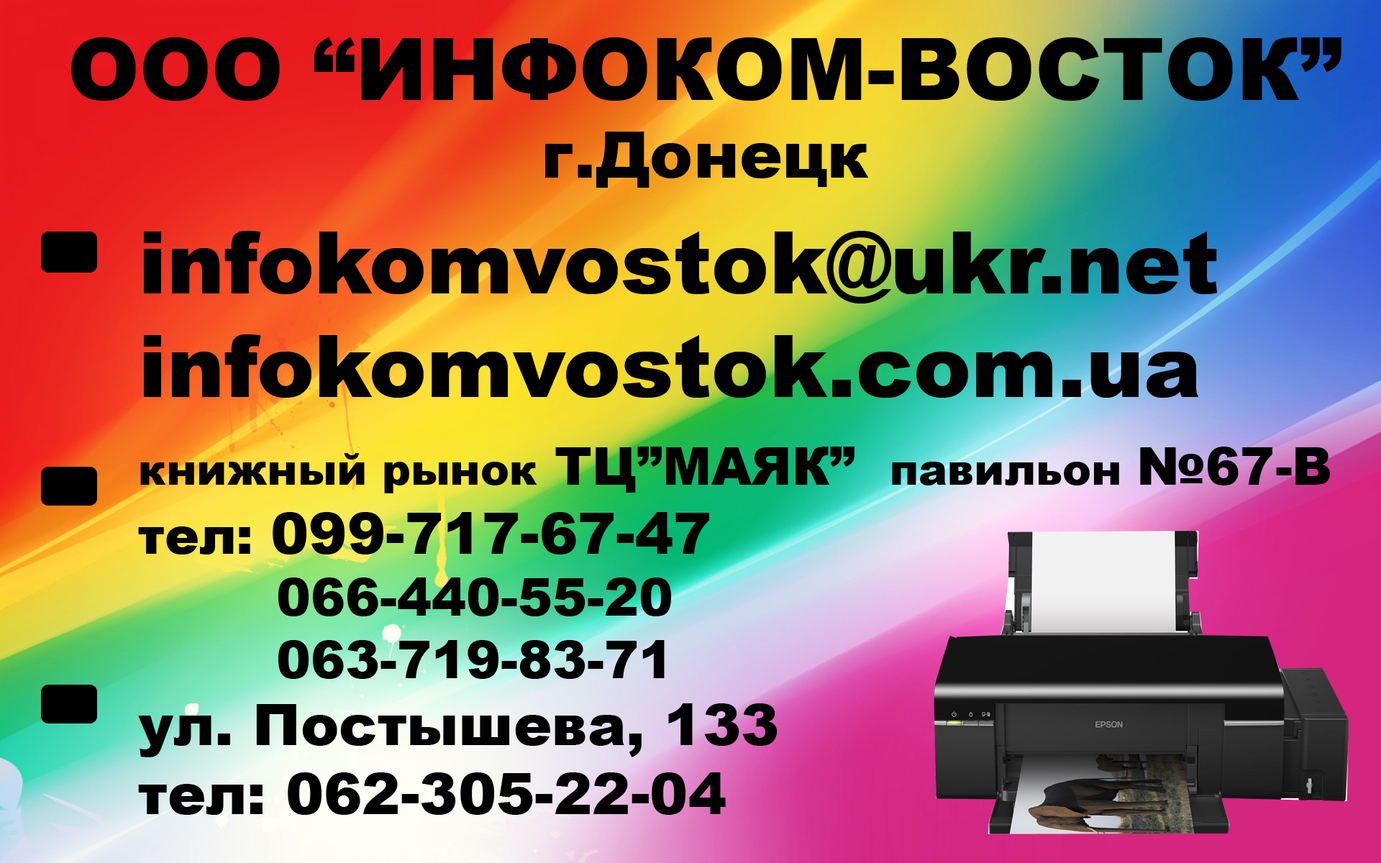
<style>
.page{position:relative;width:1381px;height:863px}
.page>*{position:absolute;margin:0}
.t1{font:86.3px "Arial-Black";color:#000000}
.t2{font:64.7px "Arial-Black";color:#000000}
.t3{font:51.8px "Arial-Black";color:#000000}
.t4{font:43.2px "Arial-Black";color:#000000}
.t5{font:57.6px "Arial-Black";color:#000000}
</style>
<div class="page">
<p class="t1" style="left:71px;top:37px;width:1271px;height:151px;text-align:center">ООО “ИНФОКОМ-ВОСТОК”<br><span class="t2">г.Донецк</span></p>
<p class="t1" style="left:144px;top:231px;width:1073px;height:167px">infokomvostok@ukr.net<br>infokomvostok.com.ua</p>
<p class="t3" style="left:138px;top:447px;width:1192px;height:232px"><span class="t4">книжный рынок</span> ТЦ”МАЯК”  <span class="t4">павильон </span>№67-В<br>тел: <span class="t5">099-717-67-47<br></span>        066-440-55-20<br>        063-719-83-71</p>
<p class="t5" style="left:138px;top:704px;width:640px;height:111px">ул. Постышева, 133<br>тел: 062-305-22-04</p>
</div>
